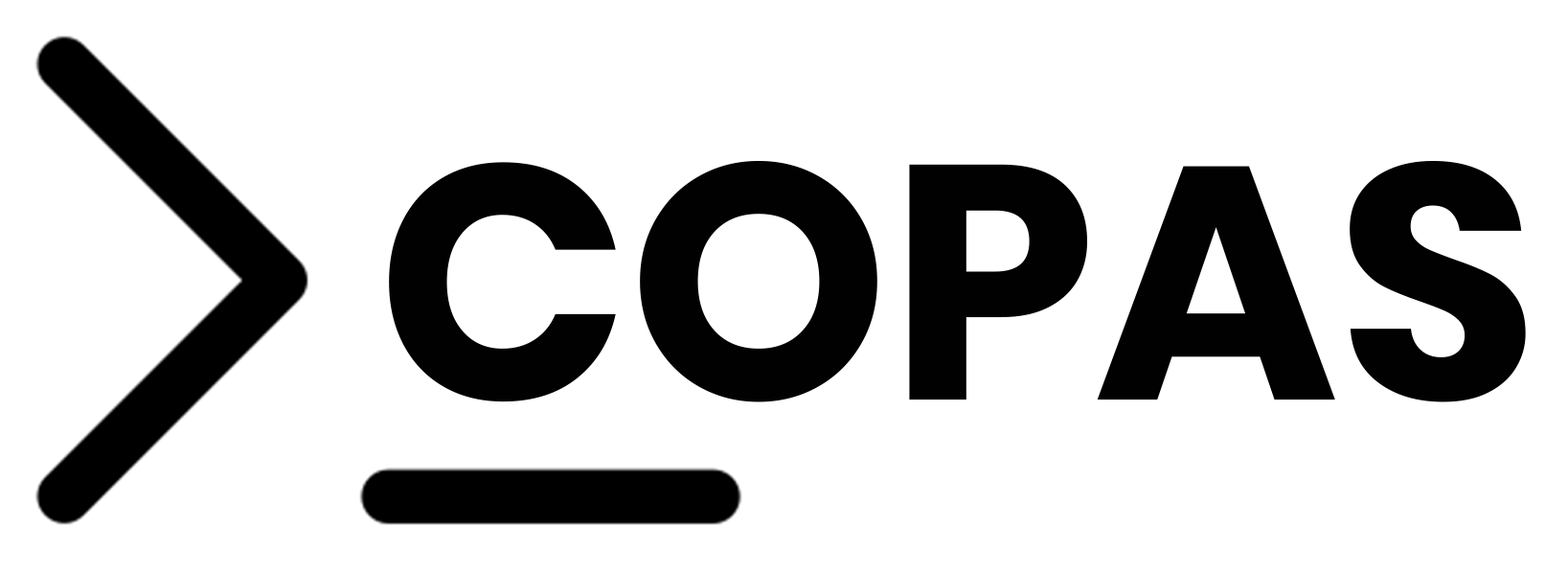
<style>
.page{position:relative;width:1568px;height:571px;background:#ffffff}
.page>*{position:absolute;margin:0}
.t1{font:332.2px "Poppins-Bold";color:#010101;text-transform:uppercase}
</style>
<div class="page">
<p class="t1" style="left:389px;top:161px;width:1137px;height:241px">COPAS</p>
</div>
